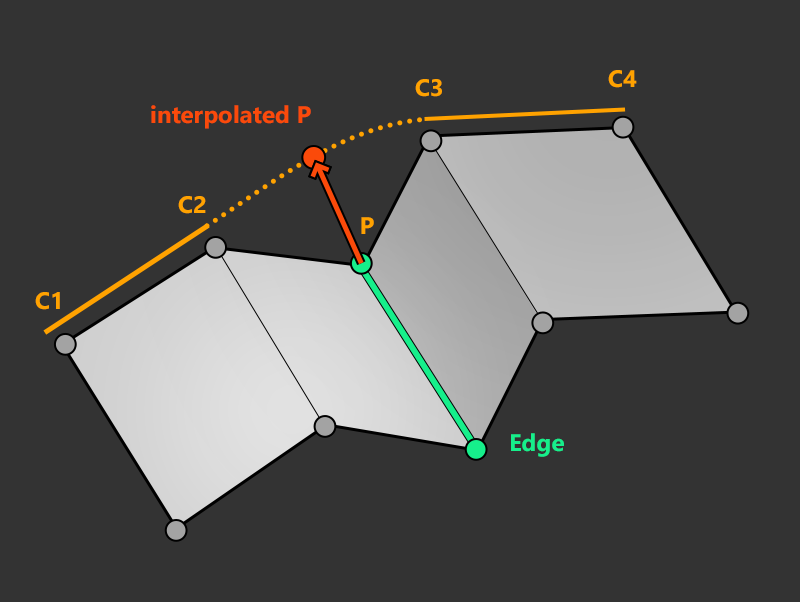
<style>
.page{position:relative;width:800px;height:602px;background:#333333}
.page>*{position:absolute;margin:0}
.t1{font:24px "SegoeUI-Bold";color:#ffa200}
.t2{font:24px "SegoeUI-Bold";color:#fb4a0a}
.t3{font:24px "SegoeUI-Bold";color:#16ef8b}
</style>
<div class="page">
<p class="t1" style="left:608px;top:70px;width:29px;height:18px">C4</p>
<p class="t1" style="left:415px;top:79px;width:27px;height:18px">C3</p>
<p class="t2" style="left:151px;top:105px;width:160px;height:24px">interpolated P</p>
<p class="t1" style="left:178px;top:196px;width:28px;height:18px">C2</p>
<p class="t1" style="left:361px;top:217px;width:13px;height:17px">P</p>
<p class="t1" style="left:35px;top:292px;width:25px;height:18px">C1</p>
<p class="t3" style="left:511px;top:433px;width:53px;height:24px">Edge</p>
</div>
